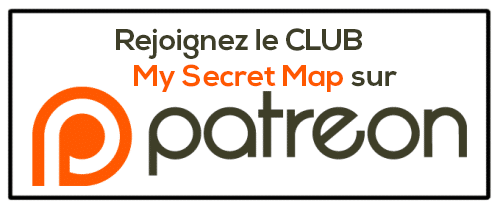
<style>
.page{position:relative;width:500px;height:208px;background:#ffffff}
.page>*{position:absolute;margin:0}
.t1{font:30px "NexaBold";color:#3e3e28}
.t2{font:30px "NexaBold";color:#ff5800}
</style>
<div class="page">
<p class="t1" style="left:116px;top:28px;width:281px;height:64px">Rejoignez le CLUB <br>   <span class="t2">My Secret Map </span>sur</p>
</div>
